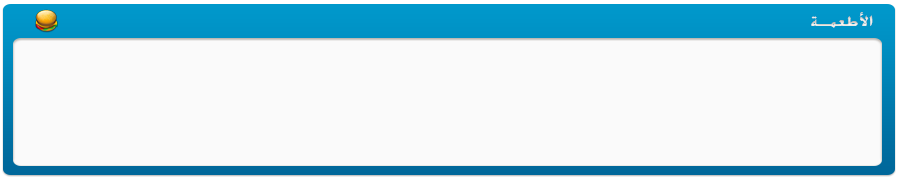
<style>
.page{position:relative;width:900px;height:180px;background:#fafafa}
.page>*{position:absolute;margin:0}
.t1{font:16px "BoutrosAdsMedium";color:#eaeae7}
</style>
<div class="page">
<p class="t1" style="left:811px;top:12px;width:62px;height:16px">الأطعمـة</p>
</div>
